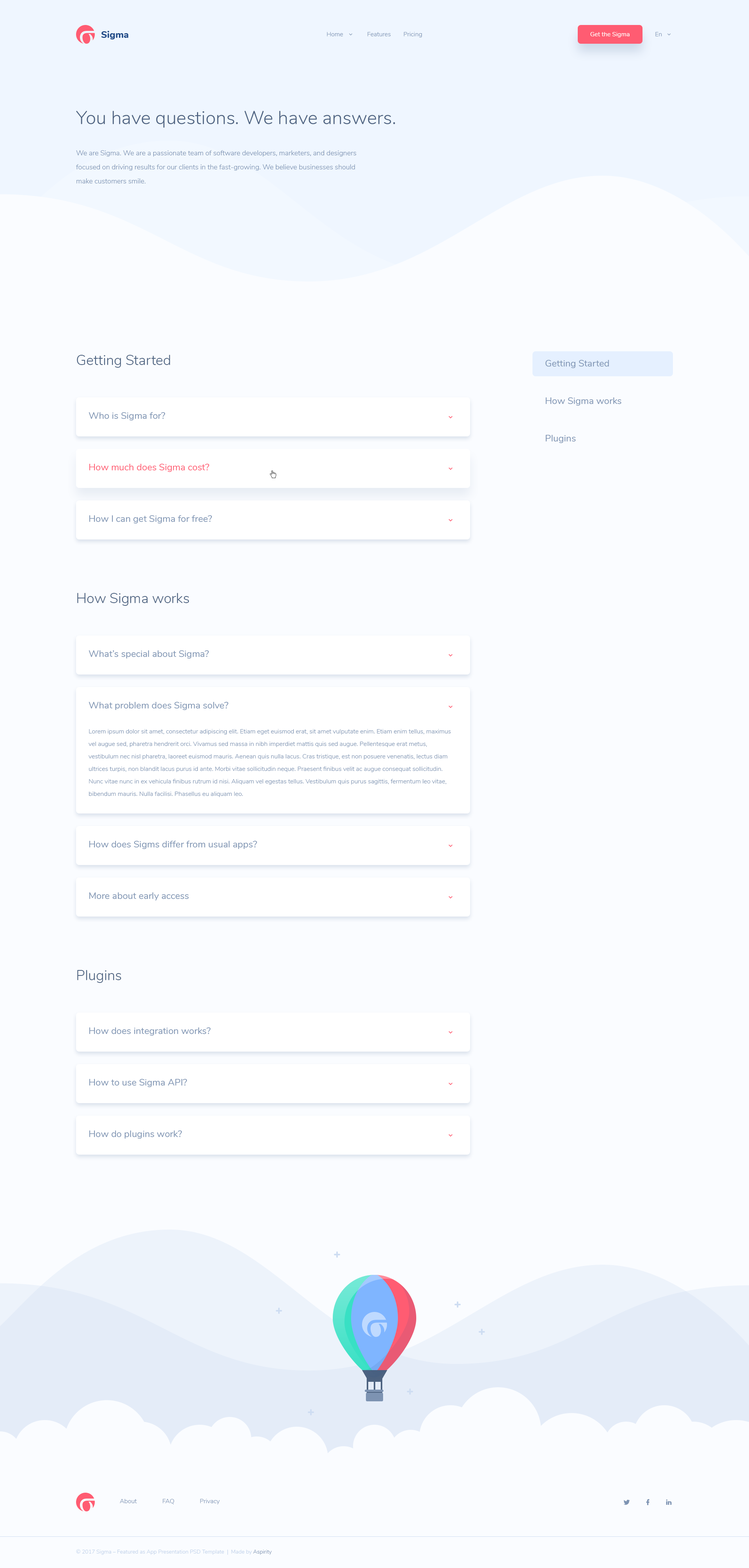
<style>
.page{position:relative;width:749px;height:1568px;background:#fafcff}
.page>*{position:absolute;margin:0}
.t1{font:6.2px "Nunito-Light";color:#7d93b3}
.t2{font:6.2px "Nunito-Regular";color:#ffffff}
.t3{font:18.7px "Nunito-Light";color:#4d6280}
.t4{font:7px/14.1px "Nunito-Light";color:#7d93b2}
.t5{font:14.1px "Nunito-Light";color:#4c6280}
.t6{font:9.4px "Nunito-Regular";color:#7d93b2}
.t7{font:9.4px "Nunito-Regular";color:#ff5c72}
.t8{font:6.2px/12.5px "Nunito-Light";color:#7d93b2}
.t9{font:5.5px "Nunito-Light";color:#bed0e9}
.t10{font:5.5px "Nunito-Light";color:#7d93b2}
</style>
<div class="page">
<p class="t1" style="left:327px;top:32px;width:16px;height:4px">Home</p>
<p class="t1" style="left:368px;top:32px;width:23px;height:4px">Features</p>
<p class="t1" style="left:404px;top:32px;width:18px;height:5px">Pricing</p>
<p class="t2" style="left:591px;top:32px;width:39px;height:5px">Get the Sigma</p>
<p class="t1" style="left:656px;top:32px;width:6px;height:4px">En</p>
<p class="t3" style="left:76px;top:111px;width:319px;height:17px">You have questions. We have answers.</p>
<p class="t4" style="left:76px;top:150px;width:280px;height:33px">We are Sigma. We are a passionate team of software developers, marketers, and designers focused on driving results for our clients in the fast-growing. We believe businesses should make customers smile.</p>
<p class="t5" style="left:77px;top:355px;width:93px;height:13px">Getting Started</p>
<p class="t6" style="left:546px;top:360px;width:63px;height:8px">Getting Started</p>
<p class="t6" style="left:546px;top:397px;width:76px;height:9px">How Sigma works</p>
<p class="t6" style="left:89px;top:412px;width:77px;height:8px">Who is Sigma for?</p>
<p class="t6" style="left:546px;top:435px;width:30px;height:8px">Plugins</p>
<p class="t7" style="left:89px;top:464px;width:121px;height:8px">How much does Sigma cost?</p>
<p class="t6" style="left:89px;top:515px;width:123px;height:8px">How I can get Sigma for free?</p>
<p class="t5" style="left:77px;top:593px;width:112px;height:13px">How Sigma works</p>
<p class="t6" style="left:89px;top:650px;width:120px;height:9px">What’s special about Sigma?</p>
<p class="t6" style="left:89px;top:702px;width:140px;height:8px">What problem does Sigma solve?</p>
<p class="t8" style="left:89px;top:729px;width:362px;height:68px">Lorem ipsum dolor sit amet, consectetur adipiscing elit. Etiam eget euismod erat, sit amet vulputate enim. Etiam enim tellus, maximus vel augue sed, pharetra hendrerit orci. Vivamus sed massa in nibh imperdiet mattis quis sed augue. Pellentesque erat metus, vestibulum nec nisl pharetra, laoreet euismod mauris. Aenean quis nulla lacus. Cras tristique, est non posuere venenatis, lectus diam ultrices turpis, non blandit lacus purus id ante. Morbi vitae sollicitudin neque. Praesent finibus velit ac augue consequat sollicitudin. Nunc vitae nunc in ex vehicula finibus rutrum id nisi. Aliquam vel egestas tellus. Vestibulum quis purus sagittis, fermentum leo vitae, bibendum mauris. Nulla facilisi. Phasellus eu aliquam leo.</p>
<p class="t6" style="left:89px;top:840px;width:168px;height:9px">How does Sigms differ from usual apps?</p>
<p class="t6" style="left:89px;top:892px;width:100px;height:9px">More about early access</p>
<p class="t5" style="left:77px;top:970px;width:44px;height:13px">Plugins</p>
<p class="t6" style="left:89px;top:1027px;width:122px;height:9px">How does integration works?</p>
<p class="t6" style="left:89px;top:1079px;width:98px;height:8px">How to use Sigma API?</p>
<p class="t6" style="left:89px;top:1130px;width:93px;height:9px">How do plugins work?</p>
<p class="t1" style="left:120px;top:1499px;width:17px;height:4px">About</p>
<p class="t1" style="left:163px;top:1499px;width:11px;height:5px">FAQ</p>
<p class="t1" style="left:200px;top:1499px;width:20px;height:5px">Privacy</p>
<p class="t9" style="left:76px;top:1549px;width:196px;height:6px">© 2017 Sigma – Featured as App Presentation PSD Template  |  Made by <span class="t10">Aspirity</span></p>
</div>
